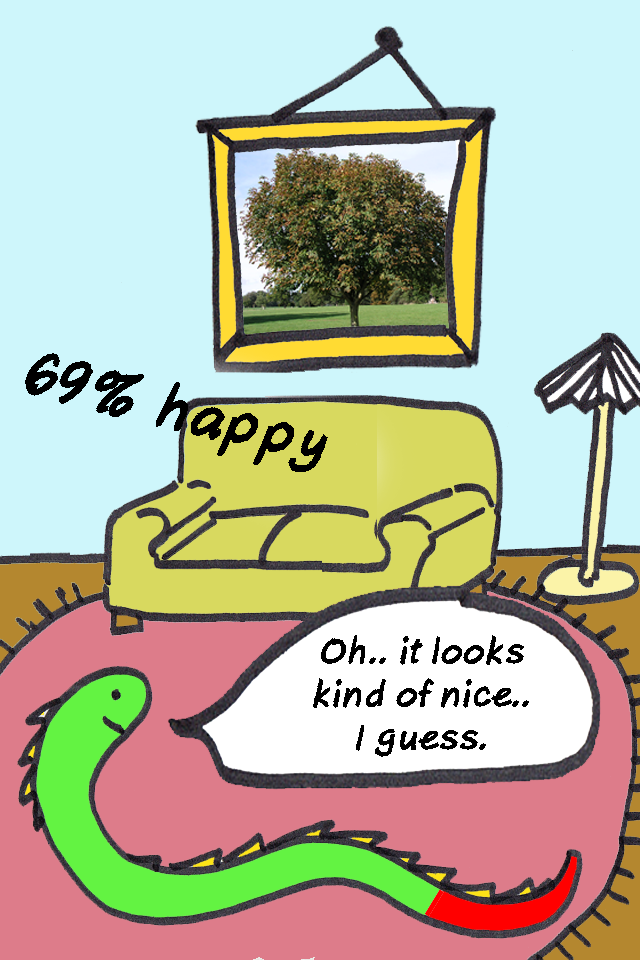
<style>
.page{position:relative;width:640px;height:960px;background:#cef6fb}
.page>*{position:absolute;margin:0}
.t1{font:59.8px "AxureHandwriting-BoldItalic";color:#000000}
.t2{font:36px "AxureHandwriting-BoldItalic";color:#000000}
</style>
<div class="page">
<p class="t1" style="left:25px;top:353px;width:303px;height:119px;rotate:14deg">69% happy</p>
<p class="t2" style="left:313px;top:635px;width:216px;height:122px;text-align:center">Oh.. it looks<br>kind of nice..<br>I guess.</p>
</div>
